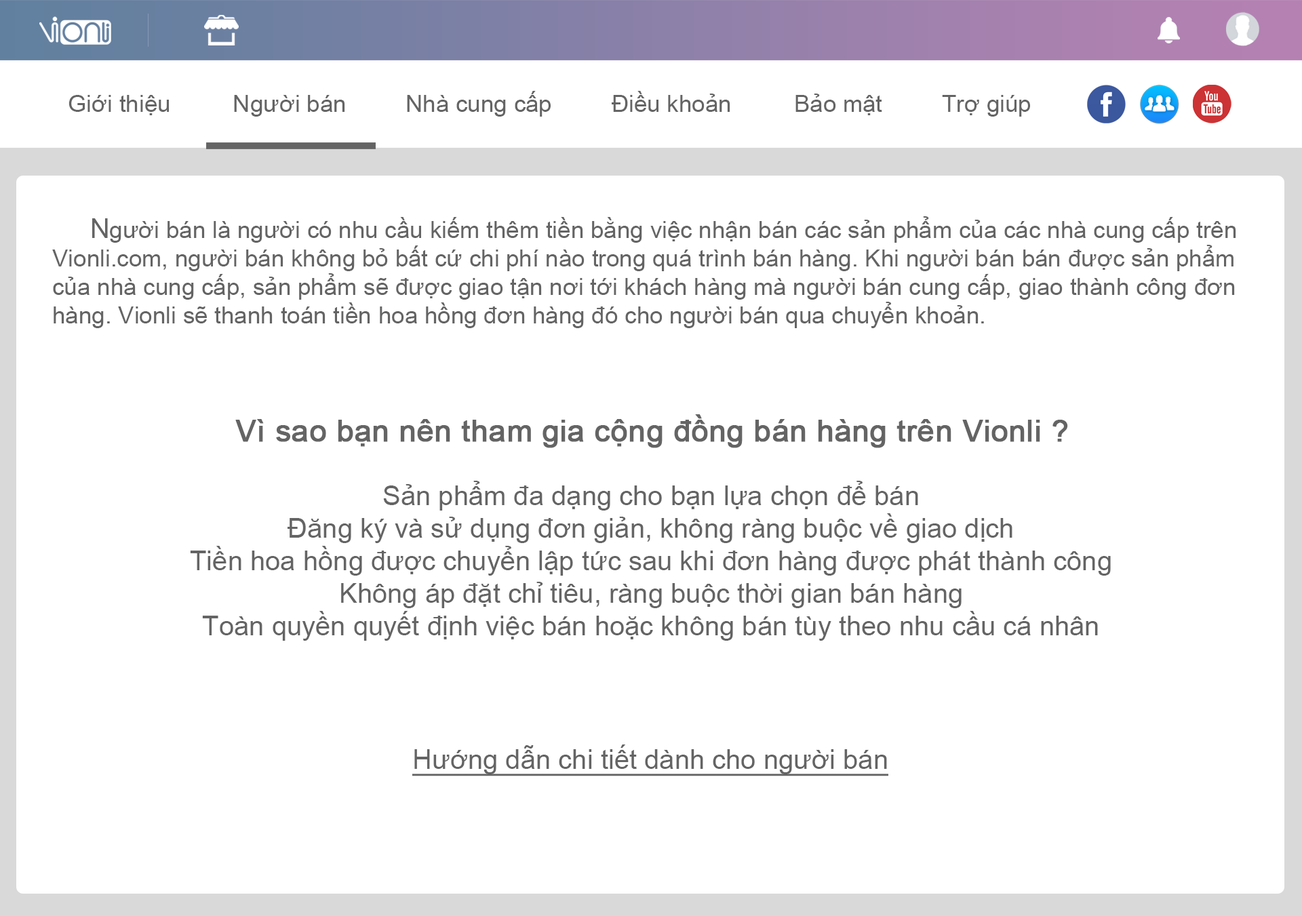
<style>
.page{position:relative;width:1302px;height:916px;background:#ffffff}
.page>*{position:absolute;margin:0}
.t1{font:23.7px "ArialMT";color:#646464}
.t2{font:27.1px "ArialMT";color:#646464}
.t3{font:30.5px "ArialMT";color:#646464;font-weight:bold}
.t4{font:27.1px "ArialMT";color:#646464;text-decoration:underline}
</style>
<div class="page">
<p class="t1" style="left:68px;top:95px;width:101px;height:20px">Giới thiệu</p>
<p class="t1" style="left:234px;top:95px;width:111px;height:22px">Người bán</p>
<p class="t1" style="left:407px;top:91px;width:144px;height:26px">Nhà cung cấp</p>
<p class="t1" style="left:612px;top:91px;width:118px;height:21px">Điều khoản</p>
<p class="t1" style="left:795px;top:94px;width:87px;height:21px">Bảo mật</p>
<p class="t1" style="left:942px;top:95px;width:88px;height:22px">Trợ giúp</p>
<p class="t1" style="left:52px;top:216px;width:1184px;height:112px"><span class="t2">     N</span>gười bán là người có nhu cầu kiếm thêm tiền bằng việc nhận bán các sản phẩm của các nhà cung cấp trên <br>Vionli.com, người bán không bỏ bất cứ chi phí nào trong quá trình bán hàng. Khi người bán bán được sản phẩm <br>của nhà cung cấp, sản phẩm sẽ được giao tận nơi tới khách hàng mà người bán cung cấp, giao thành công đơn <br>hàng. Vionli sẽ thanh toán tiền hoa hồng đơn hàng đó cho người bán qua chuyển khoản.</p>
<p class="t3" style="left:235px;top:414px;width:833px;height:34px">Vì sao bạn nên tham gia cộng đồng bán hàng trên Vionli ?</p>
<p class="t2" style="left:190px;top:481px;width:921px;height:160px;text-align:center">Sản phẩm đa dạng cho bạn lựa chọn để bán<br>Đăng ký và sử dụng đơn giản, không ràng buộc về giao dịch<br>Tiền hoa hồng được chuyển lập tức sau khi đơn hàng được phát thành công<br>Không áp đặt chỉ tiêu, ràng buộc thời gian bán hàng<br>Toàn quyền quyết định việc bán hoặc không bán tùy theo nhu cầu cá nhân</p>
<p class="t4" style="left:412px;top:744px;width:476px;height:32px">Hướng dẫn chi tiết dành cho người bán</p>
</div>
